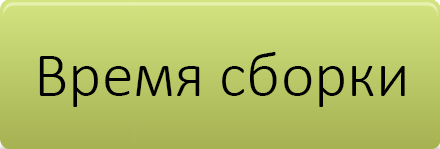
<style>
.page{position:relative;width:440px;height:149px}
.page>*{position:absolute;margin:0}
.t1{font:64px "Calibri-Light";color:#000000}
</style>
<div class="page">
<p class="t1" style="left:39px;top:52px;width:366px;height:55px">Время сборки</p>
</div>
